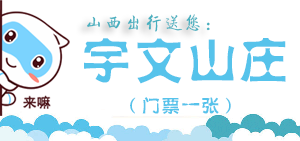
<style>
.page{position:relative;width:300px;height:141px;background:#ffffff}
.page>*{position:absolute;margin:0}
.t1{font:18px "FZQTJW--GB1-0";letter-spacing:0.1em;color:#46afbf}
.t2{font:48px "FZSHHJW--GB1-0";letter-spacing:0.1em;color:#56c3eb}
.t3{font:18px "FZSHHJW--GB1-0";letter-spacing:0.1em;color:#56c3eb}
</style>
<div class="page">
<p class="t1" style="left:87px;top:14px;width:123px;height:18px">山西出行送您：</p>
<p class="t2" style="left:84px;top:38px;width:202px;height:46px">宇文山庄</p>
<p class="t3" style="left:130px;top:97px;width:101px;height:17px">（门票一张）</p>
</div>
